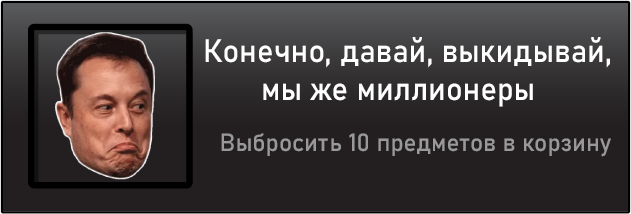
<style>
.page{position:relative;width:631px;height:214px;background:#231f20}
.page>*{position:absolute;margin:0}
.t1{font:32px "Bahnschrift";color:#ffffff;scale:0.96 1}
.t2{font:24.6px "Bahnschrift";color:#999999}
</style>
<div class="page">
<p class="t1" style="left:205px;top:37px;width:405px;height:70px;text-align:justify">Конечно, давай, выкидывай, <br>       мы же миллионеры</p>
<p class="t2" style="left:221px;top:133px;width:390px;height:24px">Выбросить 10 предметов в корзину</p>
</div>
